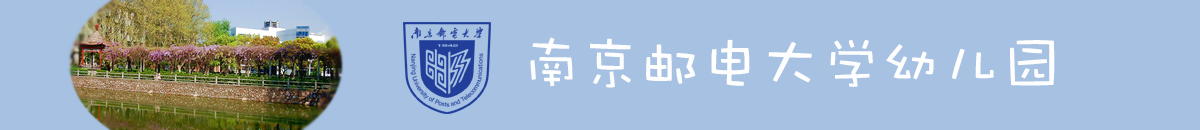
<style>
.page{position:relative;width:1200px;height:130px;background:#a6c1e2}
.page>*{position:absolute;margin:0}
.t1{font:60px "DFWaWaSC-W5";color:#fefefe}
</style>
<div class="page">
<p class="t1" style="left:530px;top:37px;width:525px;height:51px">南京邮电大学幼儿园</p>
</div>
